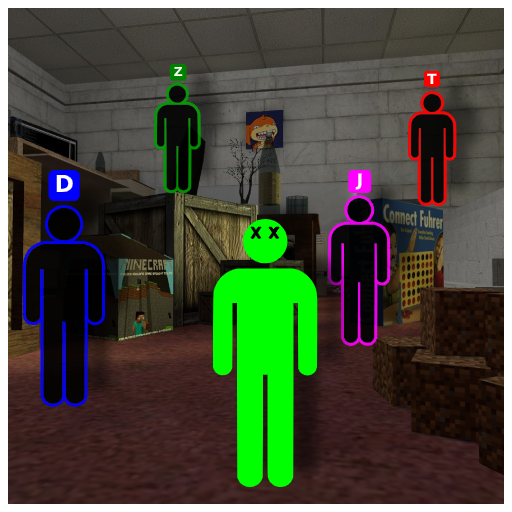
<style>
.page{position:relative;width:512px;height:512px}
.page>*{position:absolute;margin:0}
.t1{font:12.5px "DejaVuSans-Bold";color:#ffffff}
.t2{font:14px "DejaVuSans-Bold";color:#ffffff}
.t3{font:17.3px "DejaVuSans-Bold";color:#ffffff}
.t4{font:23.4px "DejaVuSans-Bold";color:#ffffff}
</style>
<div class="page">
<p class="t1" style="left:174px;top:67px;width:9px;height:9px">Z</p>
<p class="t2" style="left:427px;top:73px;width:10px;height:11px">T</p>
<p class="t3" style="left:355px;top:173px;width:7px;height:17px">J</p>
<p class="t4" style="left:56px;top:175px;width:17px;height:17px">D</p>
</div>
